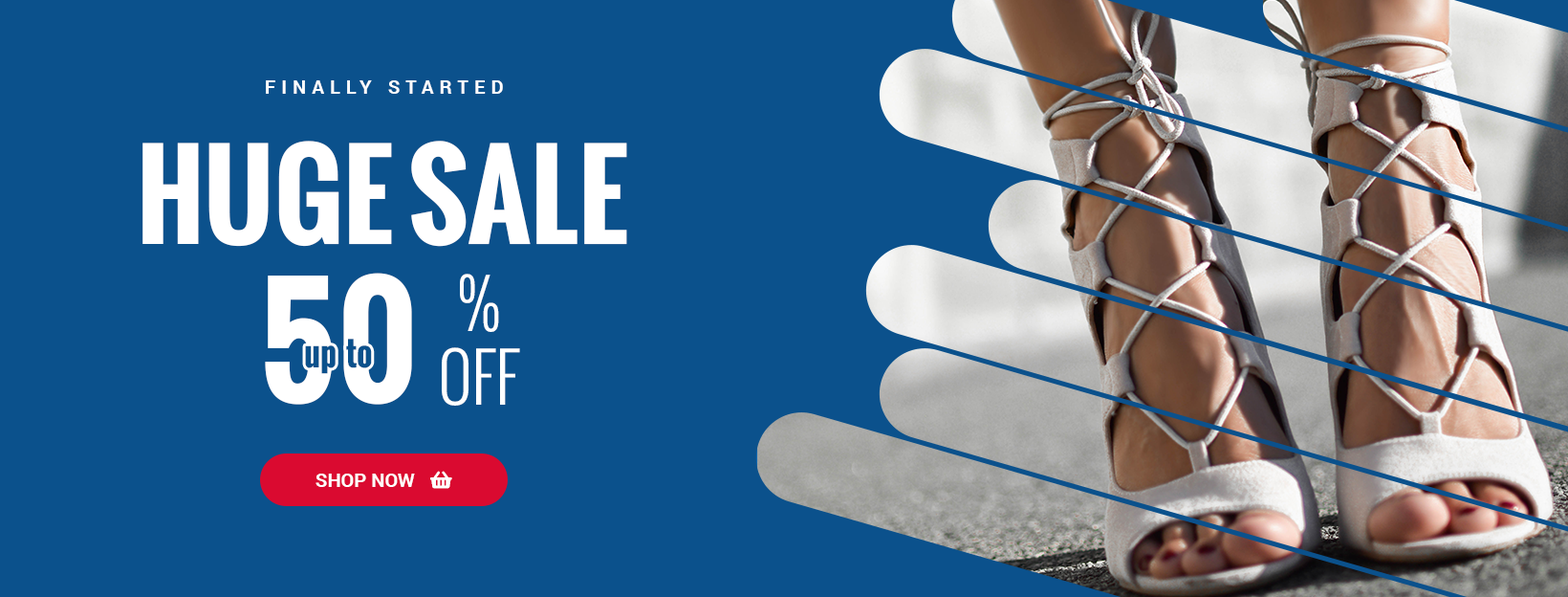
<style>
.page{position:relative;width:1568px;height:597px;background:#0b518c}
.page>*{position:absolute;margin:0}
.t1{font:19.1px "Roboto-Bold";letter-spacing:0.3em;color:#ffffff}
.t2{font:114.7px "Oswald-Bold";color:#ffffff}
.t3{font:143.4px "Oswald-Bold";color:#ffffff}
.t4{font:66.9px "Oswald-Light";color:#ffffff}
.t5{font:33.5px "Oswald-Bold";color:#0b518c}
.t6{font:19.1px "Roboto-Bold";color:#ffffff}
</style>
<div class="page">
<p class="t1" style="left:266px;top:80px;width:237px;height:14px">FINALLY STARTED</p>
<p class="t2" style="left:142px;top:141px;width:485px;height:106px">HUGE SALE</p>
<p class="t3" style="left:265px;top:272px;width:147px;height:132px">50</p>
<p class="t4" style="left:460px;top:273px;width:39px;height:59px">%</p>
<p class="t5" style="left:305px;top:338px;width:67px;height:36px">up  to</p>
<p class="t4" style="left:442px;top:347px;width:78px;height:58px">0FF</p>
<p class="t6" style="left:316px;top:473px;width:99px;height:14px">SHOP NOW</p>
</div>
